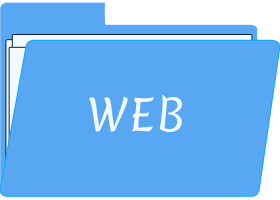
<style>
.page{position:relative;width:280px;height:200px;background:#57a7f3}
.page>*{position:absolute;margin:0}
.t1{font:42.5px "Merienda-Regular_0_wt";color:#f2f9ff}
</style>
<div class="page">
<p class="t1" style="left:89px;top:95px;width:93px;height:37px">WEB</p>
</div>
